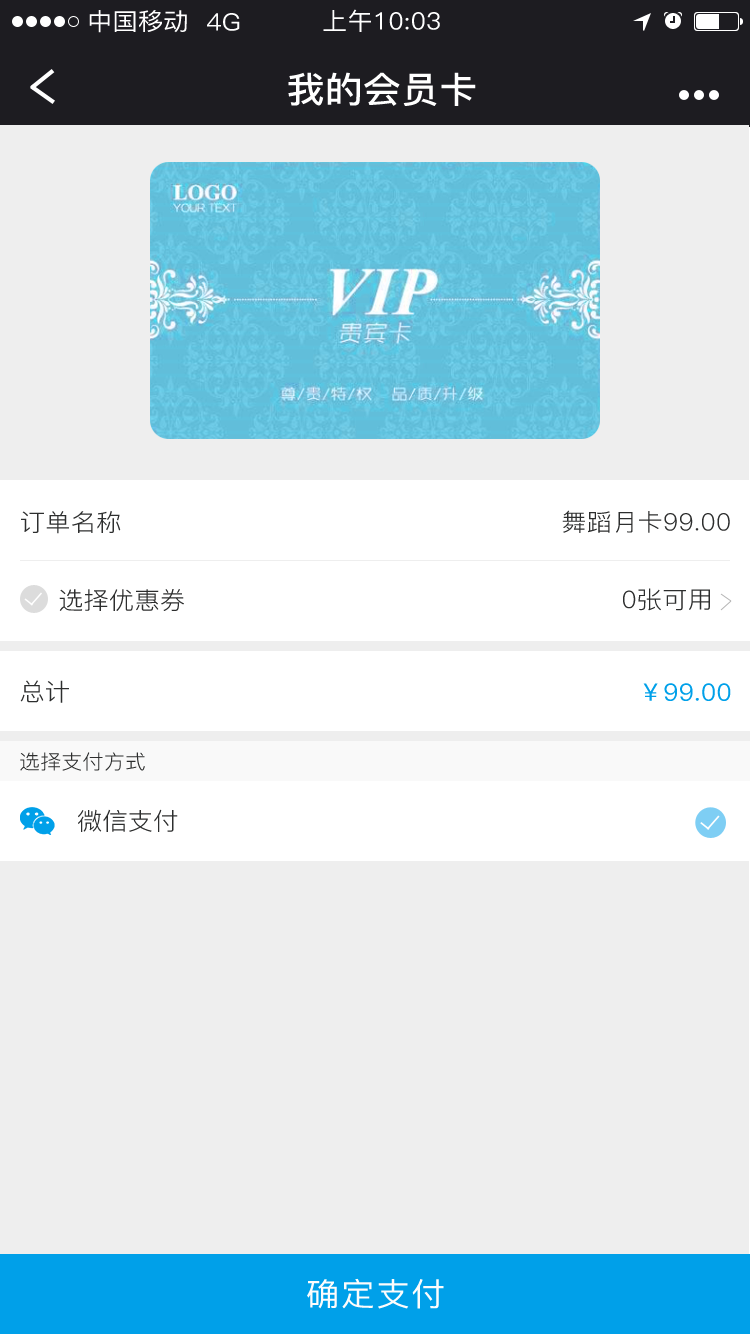
<style>
.page{position:relative;width:750px;height:1334px;background:#eeeeee}
.page>*{position:absolute;margin:0}
.t1{font:24px "PingFang-SC-Medium";letter-spacing:0.01em;color:#ffffff;scale:1.05 1}
.t2{font:36px "PingFang-SC-Bold";letter-spacing:0.01em;color:#ffffff;scale:1.05 1}
.t3{font:24px "PingFang-SC-Regular";letter-spacing:0.01em;color:#2d2e2e;scale:1.05 1}
.t4{font:24px "PingFang-SC-Medium";letter-spacing:0.01em;color:#00a0e9;scale:1.05 1}
.t5{font:20px "PingFang-SC-Regular";letter-spacing:0.01em;color:#2d2e2e;scale:1.05 1}
.t6{font:32px "PingFang-SC-Medium";letter-spacing:0.05em;color:#fdfcfc;scale:1.05 1}
</style>
<div class="page">
<p class="t1" style="left:89px;top:10px;width:98px;height:23px">中国移动</p>
<p class="t1" style="left:207px;top:13px;width:33px;height:18px">4G</p>
<p class="t1" style="left:323px;top:9px;width:117px;height:23px">上午10:03</p>
<p class="t2" style="left:288px;top:72px;width:188px;height:34px">我的会员卡</p>
<p class="t3" style="left:562px;top:510px;width:168px;height:23px">舞蹈月卡99.00</p>
<p class="t3" style="left:21px;top:511px;width:100px;height:23px">订单名称</p>
<p class="t3" style="left:59px;top:589px;width:125px;height:22px">选择优惠券</p>
<p class="t3" style="left:623px;top:588px;width:87px;height:23px">0张可用</p>
<p class="t3" style="left:20px;top:680px;width:49px;height:23px">总计</p>
<p class="t4" style="left:643px;top:683px;width:88px;height:18px">￥99.00</p>
<p class="t5" style="left:20px;top:752px;width:125px;height:19px">选择支付方式</p>
<p class="t3" style="left:78px;top:809px;width:100px;height:23px">微信支付</p>
<p class="t6" style="left:307px;top:1278px;width:137px;height:31px">确定支付</p>
</div>
